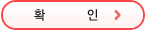
<style>
.page{position:relative;width:148px;height:30px;background:#fff3f3}
.page>*{position:absolute;margin:0}
.t1{font:13.2px "YDIYGO330";color:#1c1c1c;scale:0.91 1}
</style>
<div class="page">
<p class="t1" style="left:34px;top:9px;width:64px;height:12px">확          인</p>
</div>
